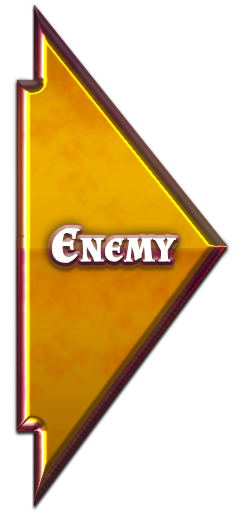
<style>
.page{position:relative;width:244px;height:512px;background:#ffffff}
.page>*{position:absolute;margin:0}
.t1{font:50px "Almendra-Bold";color:#ffffff;font-variant:small-caps;font-weight:bold}
</style>
<div class="page">
<p class="t1" style="left:52px;top:228px;width:124px;height:35px">Enemy</p>
</div>
